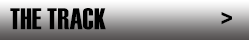
<style>
.page{position:relative;width:249px;height:40px}
.page>*{position:absolute;margin:0}
.t1{font:30px "Haettenschweiler";color:#000000}
.t2{font:36px "Haettenschweiler";color:#000000;scale:0.83 1}
</style>
<div class="page">
<p class="t1" style="left:10px;top:8px;width:96px;height:22px">THE TRACK</p>
<p class="t2" style="left:221px;top:12px;width:11px;height:13px">&gt;</p>
</div>
